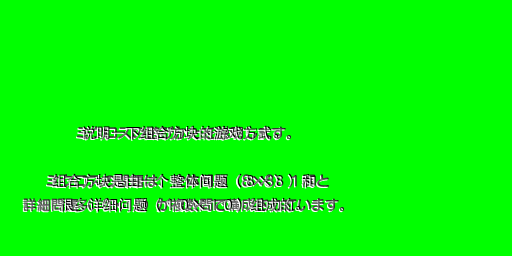
<style>
.page{position:relative;width:512px;height:256px;background:#00ff00}
.page>*{position:absolute;margin:0}
.t1{font:14.7px/24px "DFPHeiW5-GB"}
</style>
<div class="page">
<p class="t1" style="left:53px;top:125px;width:263px;height:87px;text-align:center">说明一下组合方块的游戏方式。<br><br>组合方块是由一个整体问题（８×８）和<br>很多详细问题（１０×１０）组成的。</p>
</div>
